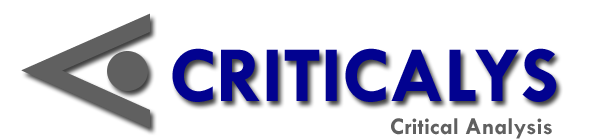
<style>
.page{position:relative;width:600px;height:140px;background:#ffffff}
.page>*{position:absolute;margin:0}
.t1{font:200px "TwCenMT-Regular";color:#606060}
.t2{font:80px "TwCenMT-Bold";color:#020290}
.t3{font:24px "TwCenMT-Bold";color:#606060}
</style>
<div class="page">
<p class="t1" style="left:21px;top:13px;width:129px;height:115px;rotate:90deg">V</p>
<p class="t2" style="left:172px;top:48px;width:385px;height:54px">CRITICALYS</p>
<p class="t3" style="left:391px;top:118px;width:161px;height:21px">Critical Analysis</p>
</div>
